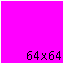
<style>
.page{position:relative;width:64px;height:64px;background:#ff00ff}
.page>*{position:absolute;margin:0}
.t1{font:12px "LetterGothicStd";color:#000000}
</style>
<div class="page">
<p class="t1" style="left:27px;top:51px;width:34px;height:9px">64x64</p>
</div>
